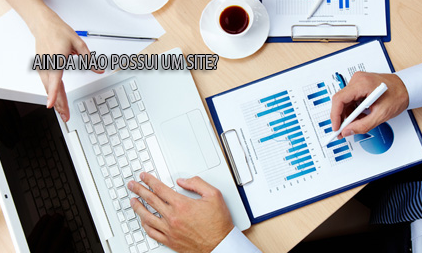
<style>
.page{position:relative;width:422px;height:253px}
.page>*{position:absolute;margin:0}
.t1{font:20px "MyriadPro-Regular";color:#c2c1c7;scale:0.76 1}
</style>
<div class="page">
<p class="t1" style="left:33px;top:52px;width:185px;height:17px">AINDA NÃO POSSUI UM SITE?</p>
</div>
